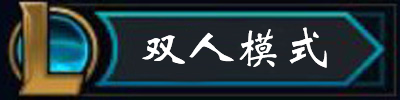
<style>
.page{position:relative;width:400px;height:100px}
.page>*{position:absolute;margin:0}
.t1{font:48px "STXinwei";color:#ffffff}
</style>
<div class="page">
<p class="t1" style="left:142px;top:27px;width:185px;height:41px">双人模式</p>
</div>
